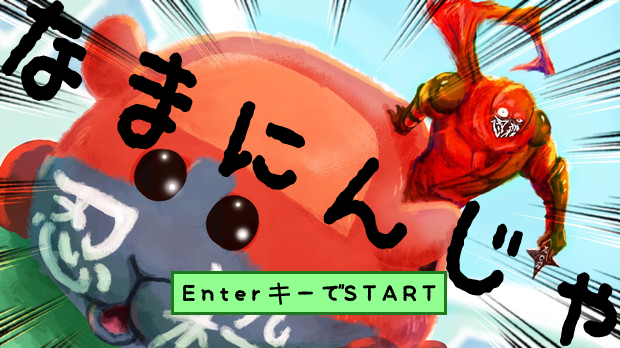
<style>
.page{position:relative;width:620px;height:348px}
.page>*{position:absolute;margin:0}
.t1{font:130.4px "KodomoRounded";color:#000000;scale:0.91 1}
.t2{font:26px "KodomoRounded";color:#000000}
.t3{font:26px "DroidSansFallback";color:#000000}
</style>
<div class="page">
<p class="t1" style="left:1px;top:0px;width:617px;height:347px;rotate:25deg">なまにんじゃ</p>
<p class="t2" style="left:183px;top:282px;width:253px;height:23px">Enter<span class="t3">キ</span>ーでSTART</p>
</div>
